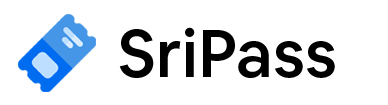
<style>
.page{position:relative;width:388px;height:105px;background:#ffffff}
.page>*{position:absolute;margin:0}
.t1{font:66.7px "AirbnbCerealWMd";color:#000000}
.t2{font:75px "AirbnbCerealWMd";color:#000000}
</style>
<div class="page">
<p class="t1" style="left:119px;top:27px;width:216px;height:51px"><span class="t2">    </span>SriPass</p>
</div>
